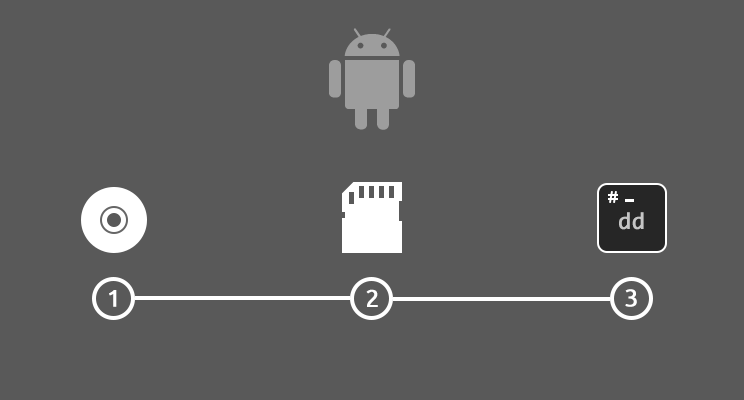
<style>
.page{position:relative;width:744px;height:400px;background:#595959}
.page>*{position:absolute;margin:0}
.t1{font:24px "Consolas";color:#c5c5c5;font-weight:bold}
.t2{font:23.8px "Ubuntu";color:#ffffff;font-weight:bold}
</style>
<div class="page">
<p class="t1" style="left:619px;top:212px;width:25px;height:18px">dd</p>
<p class="t2" style="left:109px;top:290px;width:8px;height:17px">1</p>
<p class="t2" style="left:366px;top:289px;width:12px;height:18px">2</p>
<p class="t2" style="left:625px;top:289px;width:12px;height:18px">3</p>
</div>
